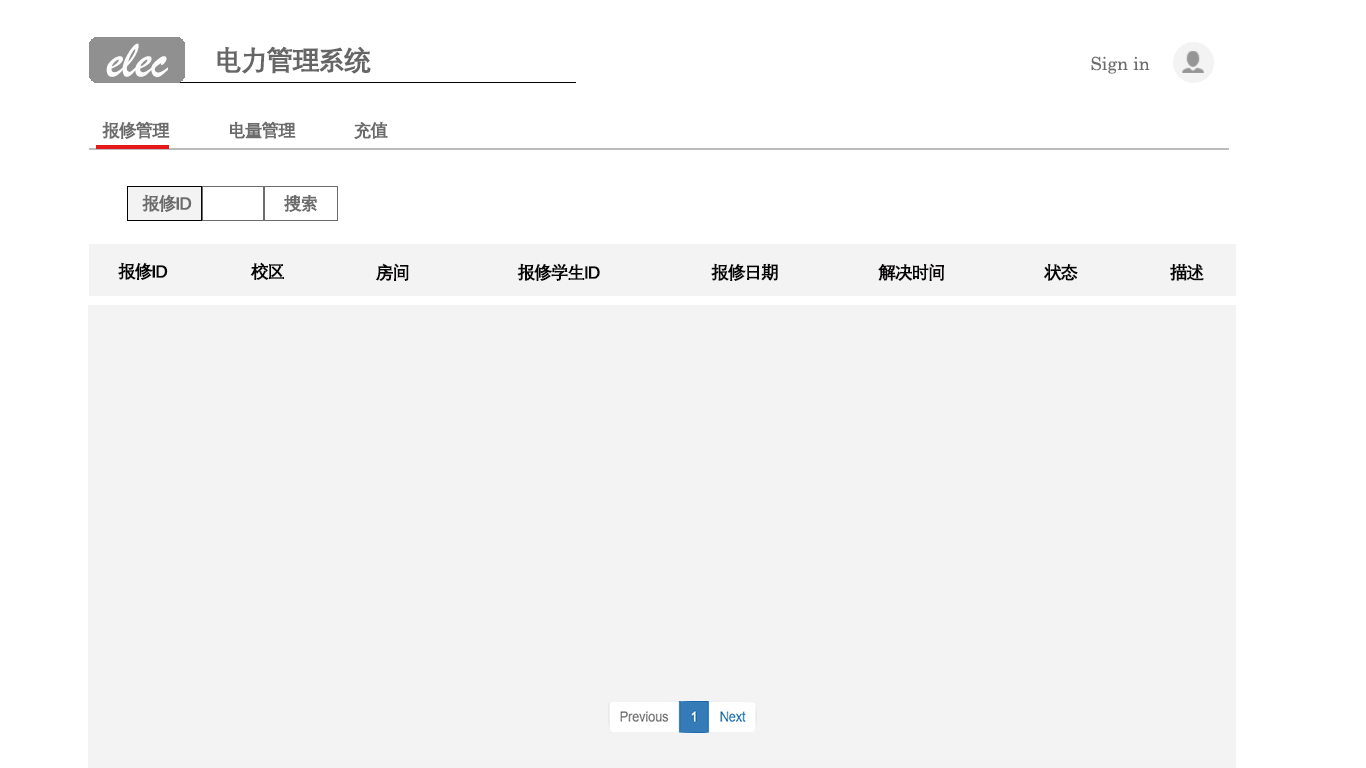
<style>
.page{position:relative;width:1366px;height:768px;background:#f3f3f3}
.page>*{position:absolute;margin:0}
.t1{font:55px "BrushScriptMT";color:#fdfcfc}
.t2{font:28px "DengXian-Bold";letter-spacing:-0.08em;color:#666666}
.t3{font:18px "Century";color:#6c6c6c}
.t4{font:18px "DengXian-Bold";letter-spacing:-0.08em;color:#6c6c6c}
.t5{font:18px "DengXian-Bold";letter-spacing:-0.08em;color:#080606}
</style>
<div class="page">
<p class="t1" style="left:106px;top:43px;width:62px;height:35px">elec</p>
<p class="t2" style="left:217px;top:46px;width:154px;height:28px">电力管理系统</p>
<p class="t3" style="left:1091px;top:56px;width:59px;height:18px">Sign in</p>
<p class="t4" style="left:102px;top:121px;width:68px;height:18px">报修管理</p>
<p class="t4" style="left:230px;top:121px;width:66px;height:18px">电量管理</p>
<p class="t4" style="left:354px;top:121px;width:34px;height:19px">充值</p>
<p class="t4" style="left:142px;top:194px;width:50px;height:18px">报修ID</p>
<p class="t4" style="left:284px;top:194px;width:33px;height:18px">搜索</p>
<p class="t5" style="left:118px;top:262px;width:50px;height:18px">报修ID</p>
<p class="t5" style="left:250px;top:262px;width:34px;height:18px">校区</p>
<p class="t5" style="left:375px;top:263px;width:34px;height:18px">房间</p>
<p class="t5" style="left:517px;top:263px;width:83px;height:18px">报修学生ID</p>
<p class="t5" style="left:711px;top:263px;width:67px;height:18px">报修日期</p>
<p class="t5" style="left:878px;top:263px;width:66px;height:18px">解决时间</p>
<p class="t5" style="left:1044px;top:264px;width:34px;height:17px">状态</p>
<p class="t5" style="left:1170px;top:263px;width:34px;height:18px">描述</p>
</div>
